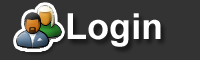
<style>
.page{position:relative;width:200px;height:60px;background:#333333}
.page>*{position:absolute;margin:0}
.t1{font:36px "Arial-BoldMT";color:#ffffff}
</style>
<div class="page">
<p class="t1" style="left:67px;top:13px;width:94px;height:34px">Login</p>
</div>
